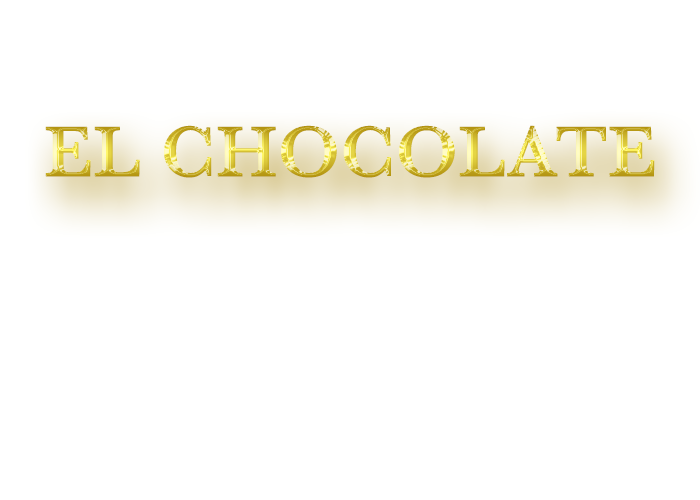
<style>
.page{position:relative;width:700px;height:500px;background:#ffffff}
.page>*{position:absolute;margin:0}
.t1{font:75px "Baskerville-SemiBold"}
</style>
<div class="page">
<p class="t1" style="left:45px;top:125px;width:610px;height:53px">EL CHOCOLATE</p>
</div>
